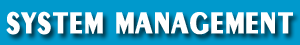
<style>
.page{position:relative;width:300px;height:45px;background:#0099cc}
.page>*{position:absolute;margin:0}
.t1{font:40.4px "XJS-Sangravee";color:#ffffff;font-weight:bold;scale:0.8 1}
</style>
<div class="page">
<p class="t1" style="left:6px;top:11px;width:287px;height:24px">SYSTEM MANAGEMENT</p>
</div>
